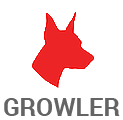
<style>
.page{position:relative;width:123px;height:120px;background:#ffffff}
.page>*{position:absolute;margin:0}
.t1{font:25px "Roboto-Bold";color:#646464;text-transform:uppercase}
</style>
<div class="page">
<p class="t1" style="left:4px;top:98px;width:116px;height:18px">Growler</p>
</div>
